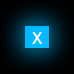
<style>
.page{position:relative;width:74px;height:74px}
.page>*{position:absolute;margin:0}
.t1{font:19.4px "Consolas";letter-spacing:0.05em;color:#fefefe}
</style>
<div class="page">
<p class="t1" style="left:32px;top:32px;width:11px;height:12px">X</p>
</div>
